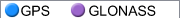
<style>
.page{position:relative;width:180px;height:18px;background:#ffffff}
.page>*{position:absolute;margin:0}
.t1{font:14px "ArialMT";color:#000000}
</style>
<div class="page">
<p class="t1" style="left:21px;top:5px;width:29px;height:11px">GPS</p>
<p class="t1" style="left:89px;top:5px;width:67px;height:11px">GLONASS</p>
</div>
